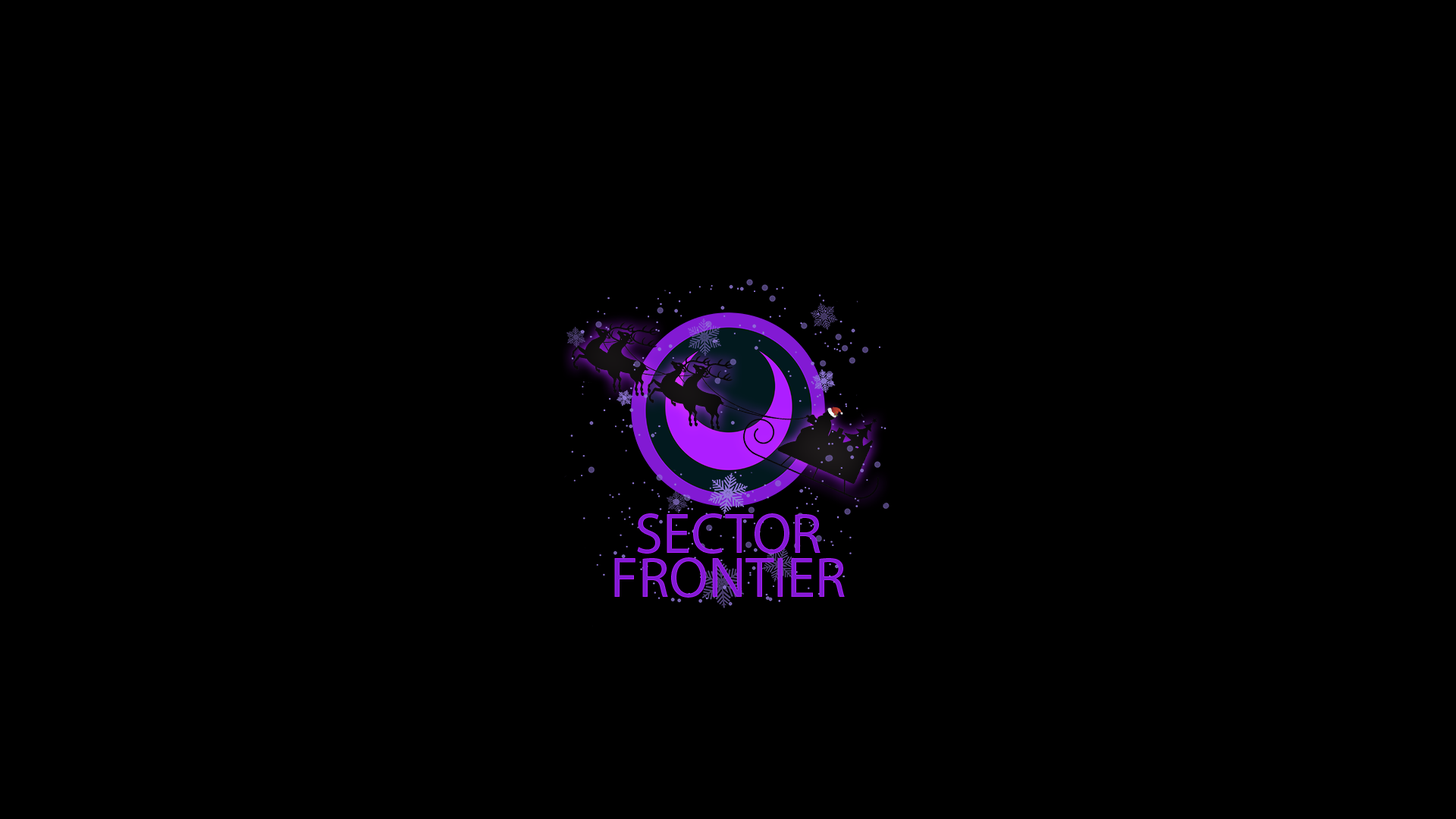
<style>
.page{position:relative;width:1456px;height:819px;background:#000000}
.page>*{position:absolute;margin:0}
.t1{font:56.9px/44.2px "MyriadPro-Regular";color:#821ad3}
</style>
<div class="page">
<p class="t1" style="left:614px;top:513px;width:231px;height:85px;text-align:center">SECTOR<br>FRONTIER</p>
</div>
